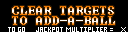
<style>
.page{position:relative;width:128px;height:32px;background:#000000}
.page>*{position:absolute;margin:0}
.t1{font:14px "Terminal"}
</style>
<div class="page">
<p class="t1" style="left:12px;top:6px;width:102px;height:9px">CLEAR TARGETS</p>
<p class="t1" style="left:12px;top:16px;width:103px;height:9px">TO ADD-A-BALL</p>
</div>
